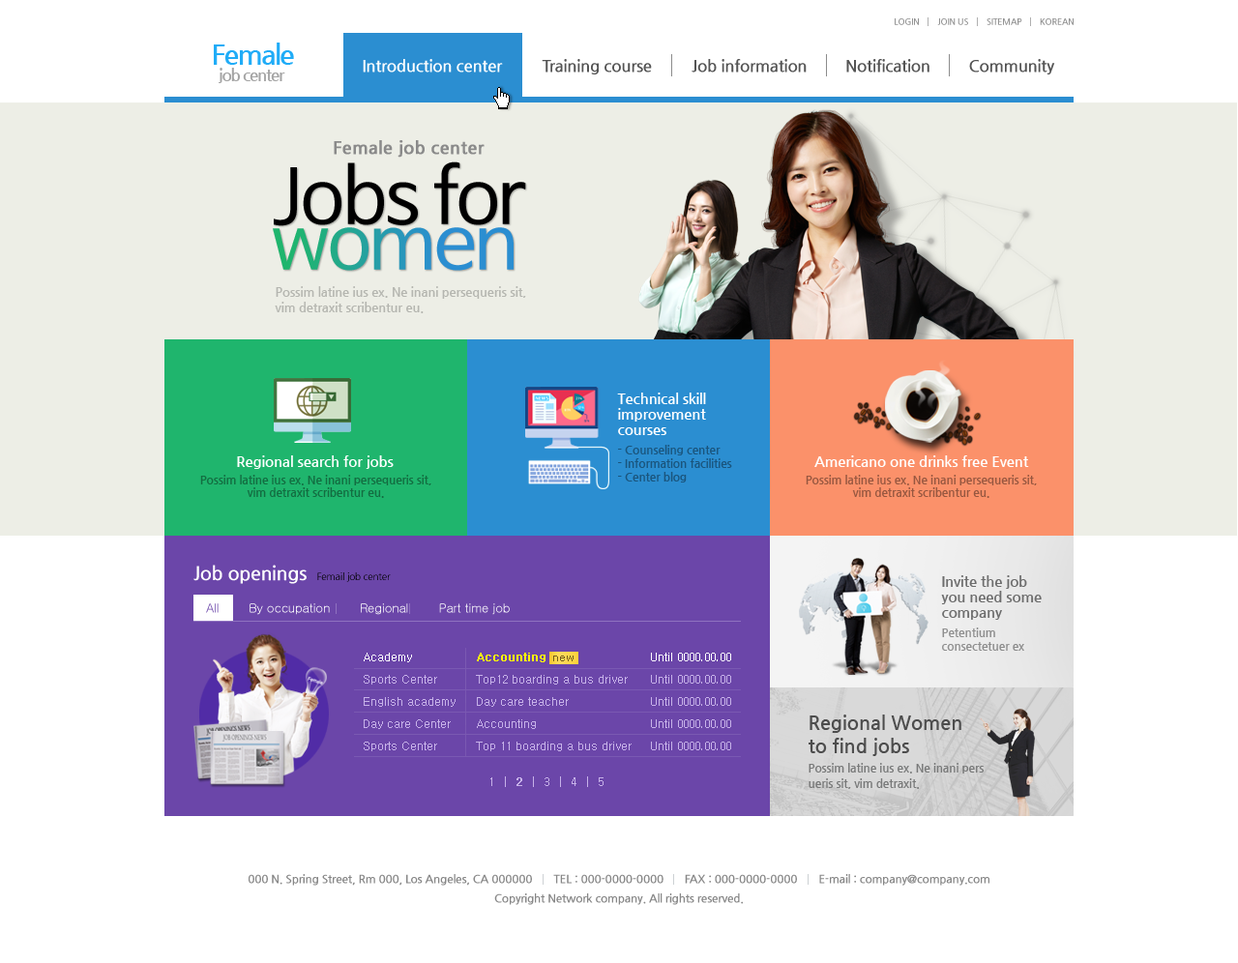
<style>
.page{position:relative;width:1238px;height:963px;background:#ffffff}
.page>*{position:absolute;margin:0}
.t1{font:8.7px "NanumGothicBold";letter-spacing:-0.02em;color:#939393}
.t2{font:16.4px "NanumGothicBold";letter-spacing:-0.02em;color:#545454}
.t3{font:16.4px "NanumGothicBold";letter-spacing:-0.02em;color:#ffffff}
.t4{font:17.4px "NanumGothicBold";color:#8a8a8a;font-weight:bold}
.t5{font:12.6px/15.5px "NanumGothicBold";letter-spacing:-0.01em;color:#b5b6b0}
.t6{font:14.5px/15.5px "NanumGothicBold";letter-spacing:-0.01em;color:#ffffff}
.t7{font:11.6px/13.5px "NanumGothicBold";letter-spacing:-0.01em;color:#1a557d}
.t8{font:14.5px "NanumGothicBold";letter-spacing:-0.01em;color:#ffffff}
.t9{font:11.6px/12.6px "NanumGothicBold";letter-spacing:-0.01em;color:#136d41}
.t10{font:11.6px/12.6px "NanumGothicBold";letter-spacing:-0.01em;color:#975740}
.t11{font:9.7px "NanumGothic";letter-spacing:-0.02em;color:#000000}
.t12{font:19.3px "NanumGothicBold";letter-spacing:-0.02em;color:#ffffff}
.t13{font:14.5px/15.5px "NanumGothicBold";letter-spacing:-0.01em;color:#6d6d6d}
.t14{font:12.6px "Gulim";letter-spacing:-0.02em;color:#ffffff}
.t15{font:12.6px "Gulim";letter-spacing:-0.02em;color:#6b46a9}
.t16{font:11.6px/13.5px "NanumGothicBold";letter-spacing:-0.01em;color:#8e8e8e}
.t17{font:11.6px/22.2px "Dotum";color:#c7b2e9}
.t18{font:11.6px/22.2px "Dotum";color:#ffffff}
.t19{font:11.6px/22.2px "Dotum";color:#fffc00;font-weight:bold}
.t20{font:19.3px/23.2px "NanumGothicBold";color:#4d4d4d}
.t21{font:11.6px/15.5px "NanumGothicBold";letter-spacing:-0.01em;color:#787979}
.t22{font:11.6px "Dotum";color:#c7b2e9}
.t23{font:11.6px "Dotum";color:#c7b2e9;font-weight:bold}
.t24{font:11.6px/19.3px "NanumGothicBold";letter-spacing:-0.02em;color:#878787}
</style>
<div class="page">
<p class="t1" style="left:895px;top:18px;width:179px;height:7px">LOGIN        JOIN US        SITEMAP        KOREAN</p>
<p class="t2" style="left:363px;top:59px;width:692px;height:15px"><span class="t3">Introduction center         </span>Training course         Job information         Notification         Community</p>
<p class="t4" style="left:334px;top:140px;width:151px;height:18px">Female job center</p>
<p class="t5" style="left:275px;top:286px;width:251px;height:27px">Possim latine ius ex. Ne inani persequeris sit,<br>vim detraxit scribentur eu.</p>
<p class="t6" style="left:617px;top:393px;width:89px;height:42px">Technical skill<br>improvement<br>courses</p>
<p class="t7" style="left:618px;top:445px;width:114px;height:38px">- Counseling center<br>- Information facilities<br>- Center blog</p>
<p class="t8" style="left:237px;top:456px;width:157px;height:13px">Regional search for jobs</p>
<p class="t8" style="left:814px;top:456px;width:215px;height:11px">Americano one drinks free Event</p>
<p class="t9" style="left:200px;top:475px;width:231px;height:23px;text-align:center">Possim latine ius ex. Ne inani persequeris sit,<br>vim detraxit scribentur eu.</p>
<p class="t10" style="left:806px;top:475px;width:231px;height:23px;text-align:center">Possim latine ius ex. Ne inani persequeris sit,<br>vim detraxit scribentur eu.</p>
<p class="t11" style="left:193px;top:565px;width:198px;height:19px"><span class="t12">Job openings  </span>Femail job center</p>
<p class="t13" style="left:941px;top:575px;width:101px;height:45px">Invite the job<br>you need some<br>company</p>
<p class="t14" style="left:206px;top:603px;width:304px;height:12px"><span class="t15">All       </span>By occupation       Regional       Part time job</p>
<p class="t16" style="left:942px;top:628px;width:82px;height:23px">Petentium<br>consectetuer ex</p>
<p class="t17" style="left:364px;top:653px;width:92px;height:98px"><span class="t18">Academy<br></span>Sports Center<br>English academy<br>Day care Center<br>Sports Center</p>
<p class="t17" style="left:476px;top:653px;width:156px;height:98px"><span class="t19">Accounting<br></span>Top12 boarding a bus driver<br>Day care teacher<br>Accounting<br>Top 11 boarding a bus driver</p>
<p class="t17" style="left:651px;top:653px;width:80px;height:97px"><span class="t18">Until 0000.00.00<br></span>Until 0000.00.00<br>Until 0000.00.00<br>Until 0000.00.00<br>Until 0000.00.00</p>
<p class="t20" style="left:809px;top:715px;width:152px;height:41px">Regional Women<br>to find jobs</p>
<p class="t21" style="left:809px;top:763px;width:175px;height:26px">Possim latine ius ex. Ne inani pers<br>ueris sit, vim detraxit.</p>
<p class="t22" style="left:490px;top:777px;width:113px;height:10px">1  |  <span class="t23">2</span>  |  3  |  4  |  5</p>
<p class="t24" style="left:249px;top:874px;width:740px;height:31px;text-align:center">000 N. Spring Street, Rm 000, Los Angeles, CA 000000       TEL : 000-0000-0000       FAX : 000-0000-0000       E-mail : company@company.com<br>Copyright Network company. All rights reserved.</p>
</div>
